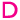
<style>
.page{position:relative;width:20px;height:20px;background:#ffffff}
.page>*{position:absolute;margin:0}
.t1{font:24px "MS-Gothic";color:#f20089}
</style>
<div class="page">
<p class="t1" style="left:2px;top:1px;width:16px;height:17px">Ｄ</p>
</div>
